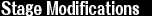
<style>
.page{position:relative;width:152px;height:16px;background:#000000}
.page>*{position:absolute;margin:0}
.t1{font:17.2px "FolkPro-Heavy";color:#ffffff;scale:0.77 1}
</style>
<div class="page">
<p class="t1" style="left:1px;top:1px;width:138px;height:17px">Stage Modifications</p>
<p class="t1" style="left:1px;top:0px;width:138px;height:17px">Stage Modifications</p>
</div>
